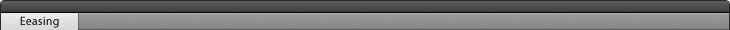
<style>
.page{position:relative;width:730px;height:30px}
.page>*{position:absolute;margin:0}
.t1{font:12px "MyriadPro-Regular"}
</style>
<div class="page">
<p class="t1" style="left:20px;top:16px;width:39px;height:12px">Eeasing</p>
</div>
